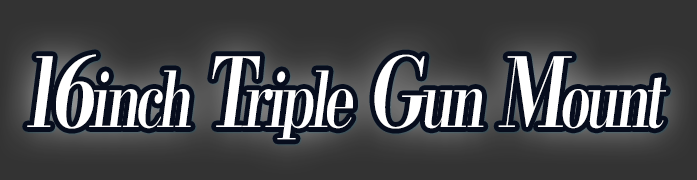
<style>
.page{position:relative;width:697px;height:180px;background:#333333}
.page>*{position:absolute;margin:0}
.t1{font:76.8px "KochoStd-Heavy";letter-spacing:-0.08em;color:#ffffff;font-style:italic;scale:0.73 1}
.t2{font:96px "KochoStd-Heavy";letter-spacing:-0.08em;color:#ffffff;font-style:italic;scale:0.73 1}
</style>
<div class="page">
<p class="t1" style="left:27px;top:54px;width:639px;height:86px"><span class="t2">16</span>inch<span class="t2"> T</span>riple<span class="t2"> G</span>un<span class="t2"> M</span>ount</p>
</div>
